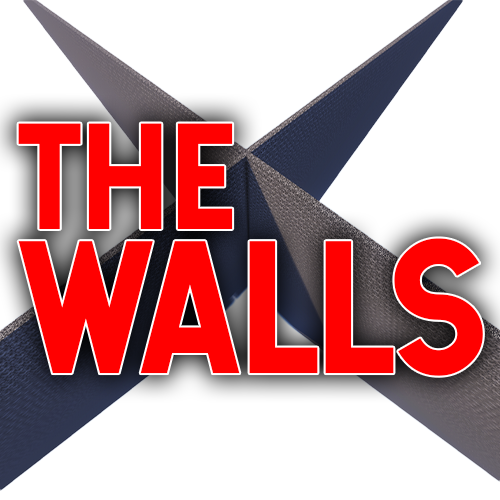
<style>
.page{position:relative;width:500px;height:500px;background:#ffffff}
.page>*{position:absolute;margin:0}
.t1{font:180px/144px "Hansief";color:#ff0000}
.t2{font:144px/144px "Hansief";color:#ff0000}
</style>
<div class="page">
<p class="t1" style="left:18px;top:123px;width:465px;height:253px"><span class="t2">THE<br></span>WALLS</p>
</div>
